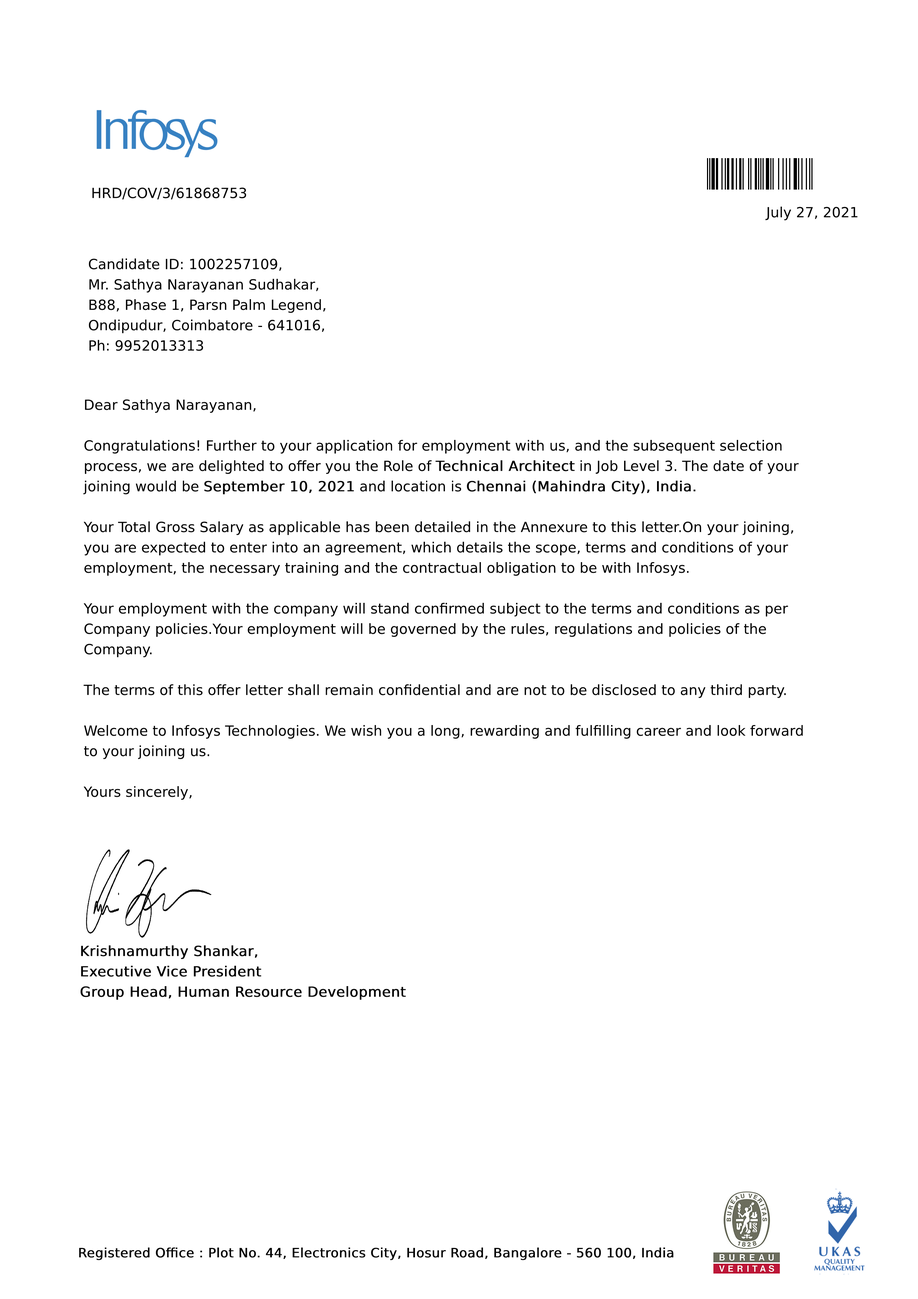
<style>
.page{position:relative;width:918px;height:1299px;background:#ffffff}
.page>*{position:absolute;margin:0}
.t1{font:14.1px "DejaVuSans";color:#000000}
.t2{font:14.1px/20.4px "DejaVuSans";color:#000000}
.t3{font:14.1px/20.4px "DejaVuSans";color:#000000;font-weight:bold}
.t4{font:13px "DejaVuSans";color:#000000;font-weight:bold}
</style>
<div class="page">
<p class="t1" style="left:92px;top:187px;width:154px;height:13px">HRD/COV/3/61868753</p>
<p class="t1" style="left:766px;top:207px;width:92px;height:13px">July 27, 2021</p>
<p class="t2" style="left:89px;top:258px;width:236px;height:93px">Candidate ID: 1002257109,<br>Mr. Sathya Narayanan Sudhakar, <br>B88, Phase 1, Parsn Palm Legend,<br>Ondipudur, Coimbatore - 641016, <br>Ph: 9952013313</p>
<p class="t2" style="left:83px;top:399px;width:720px;height:401px">Dear Sathya Narayanan,<br><br>Congratulations! Further to your application for employment with us, and the subsequent selection process, we are delighted to offer you the Role of <span class="t3">Technical Architect </span>in Job Level 3. The date of your joining would be <span class="t3">September 10, 2021 </span>and location is <span class="t3">Chennai (Mahindra City), India.<br></span><br>Your Total Gross Salary as applicable has been detailed in the Annexure to this letter.On your joining, you are expected to enter into an agreement, which details the scope, terms and conditions of your employment, the necessary training and the contractual obligation to be with Infosys.<br><br>Your employment with the company will stand confirmed subject to the terms and conditions as per Company policies.Your employment will be governed by the rules, regulations and policies of the Company. <br><br>The terms of this offer letter shall remain confidential and are not to be disclosed to any third party. <br><br>Welcome to Infosys Technologies. We wish you a long, rewarding and fulfilling career and look forward to your joining us.<br><br>Yours sincerely,</p>
<p class="t3" style="left:80px;top:945px;width:326px;height:55px">Krishnamurthy Shankar,<br>Executive Vice President<br>Group Head, Human Resource Development</p>
<p class="t4" style="left:79px;top:1247px;width:594px;height:13px">Registered Office : Plot No. 44, Electronics City, Hosur Road, Bangalore - 560 100, India</p>
</div>
